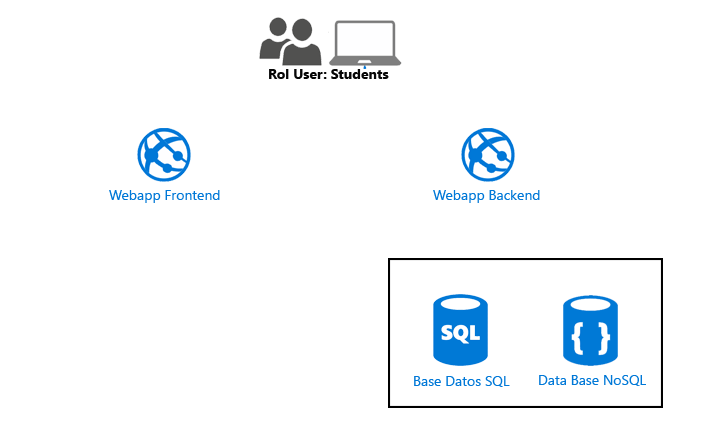
<style>
.page{position:relative;width:709px;height:425px;background:#ffffff}
.page>*{position:absolute;margin:0}
.t1{font:14px "SegoeUI-Bold";color:#060606}
.t2{font:14px "SegoeUI";color:#0078d7}
</style>
<div class="page">
<p class="t1" style="left:269px;top:69px;width:120px;height:10px">Rol User: Students</p>
<p class="t2" style="left:109px;top:190px;width:111px;height:13px">Webapp Frontend</p>
<p class="t2" style="left:433px;top:190px;width:107px;height:13px">Webapp Backend</p>
<p class="t2" style="left:414px;top:376px;width:96px;height:11px">Base Datos SQL</p>
<p class="t2" style="left:539px;top:375px;width:107px;height:11px">Data Base NoSQL</p>
</div>
